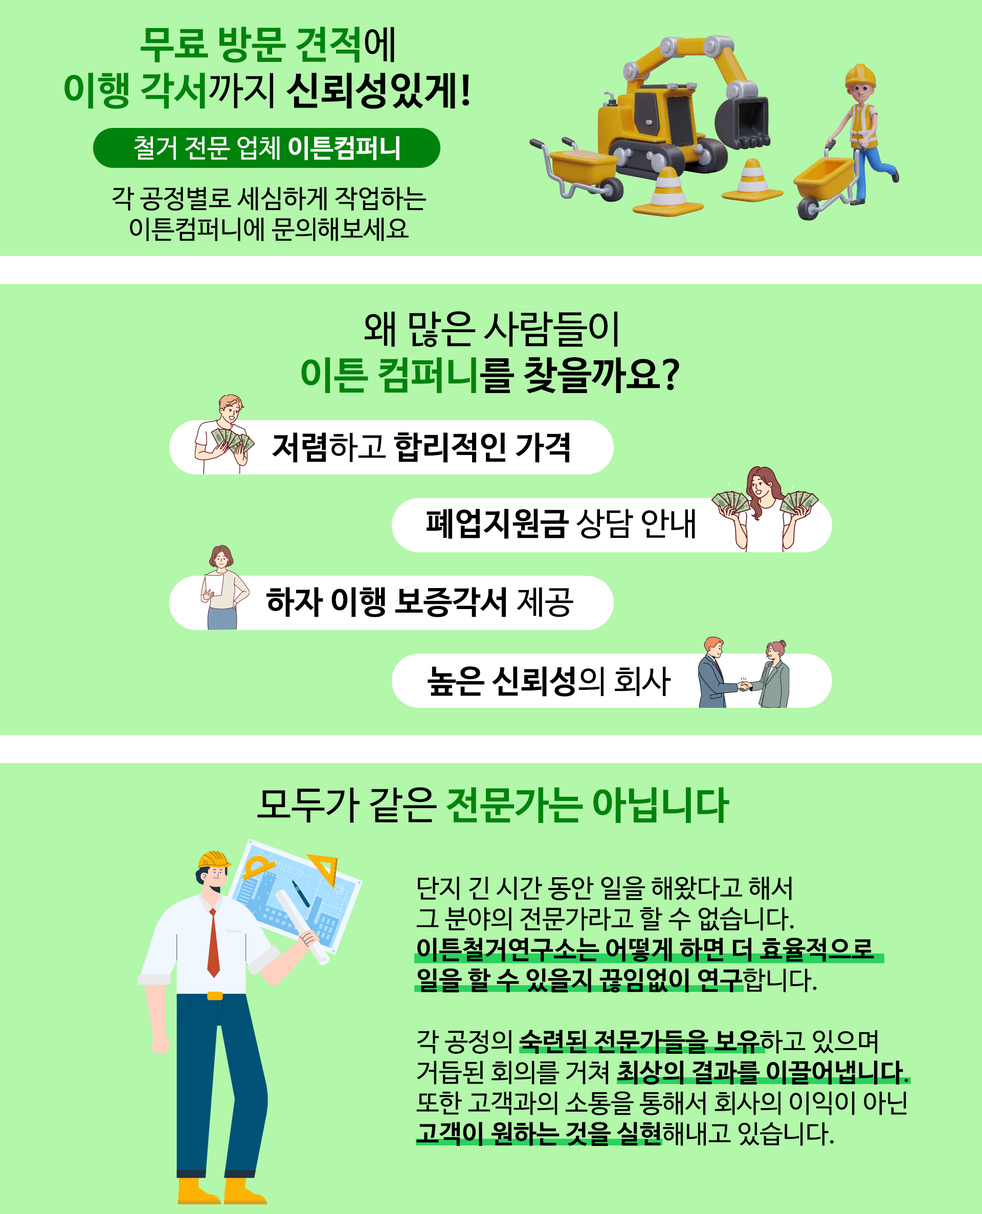
<style>
.page{position:relative;width:982px;height:1214px;background:#b3f7aa}
.page>*{position:absolute;margin:0}
.t1{font:38.4px "NanumBarunGothicBold";letter-spacing:0.003em;color:#00830c}
.t2{font:38.4px "NanumBarunGothic";letter-spacing:0.003em;color:#000000}
.t3{font:38.4px "NanumBarunGothicBold";letter-spacing:0.003em;color:#000000}
.t4{font:25.6px "NanumBarunGothic";letter-spacing:0.003em;color:#ffffff}
.t5{font:25.6px "NanumBarunGothicBold";letter-spacing:0.003em;color:#ffffff}
.t6{font:25.6px "NanumBarunGothic";letter-spacing:0.003em;color:#000000}
.t7{font:32px "NanumBarunGothicBold";letter-spacing:0.003em;color:#000000}
.t8{font:32px "NanumBarunGothic";letter-spacing:0.003em;color:#000000}
.t9{font:25.6px "NanumBarunGothicBold";letter-spacing:0.003em;color:#000000}
</style>
<div class="page">
<p class="t1" style="left:64px;top:27px;width:406px;height:82px;text-align:center">무료 방문 견적<span class="t2">에<br></span>이행 각서<span class="t2">까지 </span><span class="t3">신뢰성있게!</span></p>
<p class="t4" style="left:134px;top:136px;width:266px;height:24px">철거 전문 업체 <span class="t5">이튼컴퍼니</span></p>
<p class="t6" style="left:112px;top:187px;width:314px;height:54px;text-align:center">각 공정별로 세심하게 작업하는<br>이튼컴퍼니에 문의해보세요</p>
<p class="t2" style="left:301px;top:311px;width:379px;height:82px;text-align:center">왜 많은 사람들이<br><span class="t1">이튼 컴퍼니</span><span class="t3">를 찾을까요?</span></p>
<p class="t7" style="left:272px;top:432px;width:298px;height:31px">저렴<span class="t8">하고 </span>합리적인 가격</p>
<p class="t7" style="left:427px;top:509px;width:268px;height:30px">폐업지원금 <span class="t8">상담 안내</span></p>
<p class="t7" style="left:266px;top:587px;width:308px;height:30px">하자 이행 보증각서 <span class="t8">제공</span></p>
<p class="t7" style="left:428px;top:666px;width:243px;height:30px">높은 신뢰성<span class="t8">의 회사</span></p>
<p class="t1" style="left:257px;top:787px;width:473px;height:36px"><span class="t2">모두가 같은 </span>전문가는 아닙니다</p>
<p class="t6" style="left:417px;top:876px;width:492px;height:270px">단지 긴 시간 동안 일을 해왔다고 해서 <br>그 분야의 전문가라고 할 수 없습니다. <br><span class="t9">이튼철거연구소는 어떻게 하면 더 효율적으로 <br>일을 할 수 있을지 끊임없이 연구</span>합니다. <br><br>각 공정의 <span class="t9">숙련된 전문가들을 보유</span>하고 있으며 <br>거듭된 회의를 거쳐 <span class="t9">최상의 결과를 이끌어냅니다</span>. <br>또한 고객과의 소통을 통해서 회사의 이익이 아닌 <br><span class="t9">고객이 원하는 것을 실현</span>해내고 있습니다.</p>
</div>
